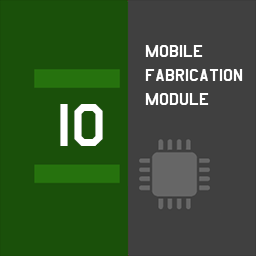
<style>
.page{position:relative;width:256px;height:256px;background:#1a500a}
.page>*{position:absolute;margin:0}
.t1{font:20px "AmarilloUSAF";color:#ffffff}
.t2{font:70px "AmarilloUSAF";color:#ffffff}
</style>
<div class="page">
<p class="t1" style="left:145px;top:45px;width:98px;height:60px">mobile<br>fabrication<br>module</p>
<p class="t2" style="left:60px;top:104px;width:43px;height:42px">10</p>
</div>
